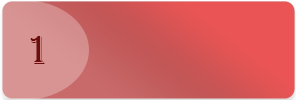
<style>
.page{position:relative;width:296px;height:100px}
.page>*{position:absolute;margin:0}
.t1{font:41.7px "Algerian";color:#6e0d0d}
</style>
<div class="page">
<p class="t1" style="left:30px;top:36px;width:15px;height:28px">1</p>
</div>
